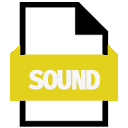
<style>
.page{position:relative;width:128px;height:128px;background:#ffffff}
.page>*{position:absolute;margin:0}
.t1{font:26px "FiraCode-Bold";letter-spacing:-0.06em;color:#f6f6f6;font-weight:bold;scale:0.93 1}
</style>
<div class="page">
<p class="t1" style="left:28px;top:70px;width:72px;height:20px">SOUND</p>
</div>
